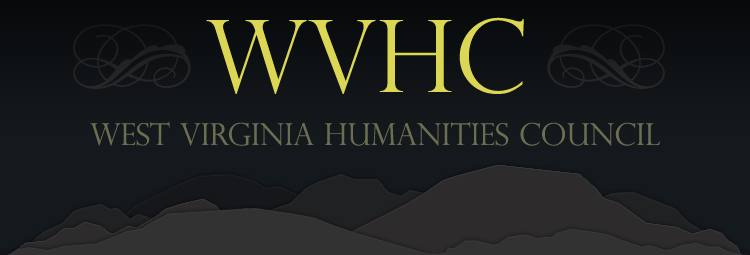
<style>
.page{position:relative;width:750px;height:255px;background:#14191d}
.page>*{position:absolute;margin:0}
.t1{font:100px "PerpetuaTitlingMT-Light";color:#dbd653}
.t2{font:100px "TypeEmbellishmentsOneLetPlain";color:#323232}
.t3{font:30px "PerpetuaTitlingMT-Light";color:#6c6e51}
</style>
<div class="page">
<p class="t1" style="left:206px;top:17px;width:318px;height:77px">WVHC</p>
<p class="t2" style="left:73px;top:24px;width:118px;height:65px">g</p>
<p class="t2" style="left:547px;top:24px;width:118px;height:65px;rotate:180deg">g</p>
<p class="t3" style="left:90px;top:122px;width:570px;height:24px">West Virginia Humanities Council</p>
</div>
